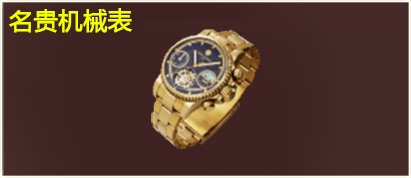
<style>
.page{position:relative;width:411px;height:178px}
.page>*{position:absolute;margin:0}
.t1{font:24px "MicrosoftYaHeiUI";color:#f4ff00;font-weight:bold}
</style>
<div class="page">
<p class="t1" style="left:9px;top:8px;width:123px;height:25px">名贵机械表</p>
</div>
